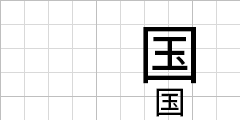
<style>
.page{position:relative;width:240px;height:120px;background:#ffffff}
.page>*{position:absolute;margin:0}
.t1{font:64px "NotoSansCJKjp-Regular";color:#000000}
.t2{font:32px "NotoSansCJKjp-Regular";color:#000000}
</style>
<div class="page">
<p class="t1" style="left:143px;top:27px;width:53px;height:90px">国<span class="t2">国</span></p>
</div>
